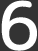
<style>
.page{position:relative;width:38px;height:51px;background:#333333}
.page>*{position:absolute;margin:0}
.t1{font:66.7px "RoundedMplus1c-Medium";color:#ffffff}
</style>
<div class="page">
<p class="t1" style="left:1px;top:0px;width:36px;height:51px">6</p>
</div>
